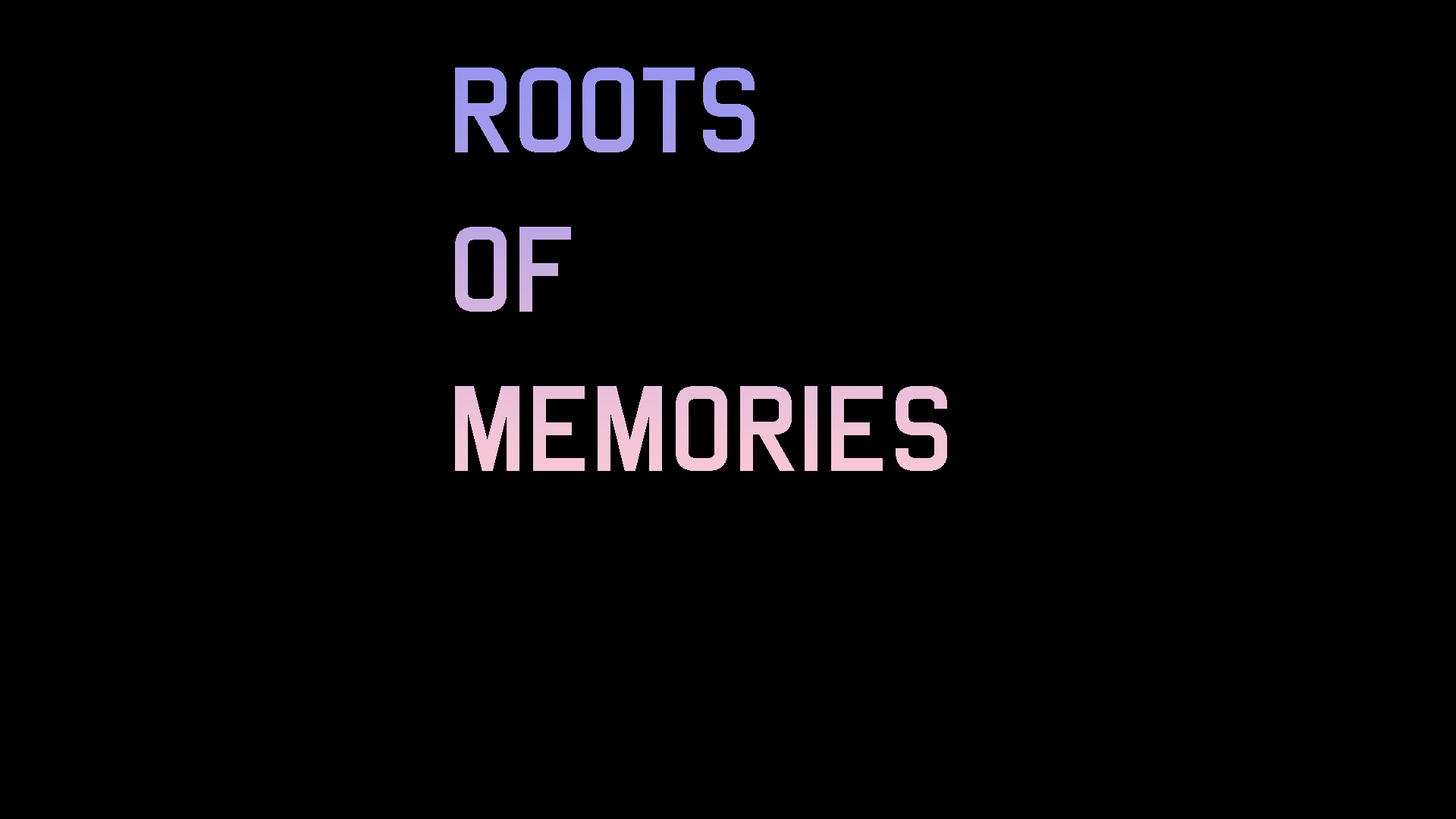
<style>
.page{position:relative;width:1456px;height:819px;background:#000000}
.page>*{position:absolute;margin:0}
.t1{font:132.7px "TrulyMadlyDpad"}
</style>
<div class="page">
<p class="t1" style="left:455px;top:67px;width:492px;height:404px">ROOTS<br>OF<br>MEMORIES</p>
</div>
